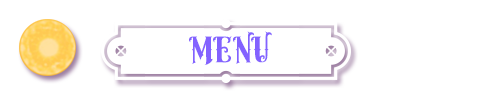
<style>
.page{position:relative;width:484px;height:106px;background:#ffffff}
.page>*{position:absolute;margin:0}
.t1{font:41.7px "Moyers";color:#8362ff}
</style>
<div class="page">
<p class="t1" style="left:189px;top:31px;width:83px;height:34px">MENU</p>
</div>
